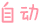
<style>
.page{position:relative;width:39px;height:24px;background:#ffffff}
.page>*{position:absolute;margin:0}
.t1{font:26px "¢è?";letter-spacing:-0.05em;color:#ff93a5}
</style>
<div class="page">
<p class="t1" style="left:1px;top:1px;width:38px;height:22px">自动</p>
</div>
